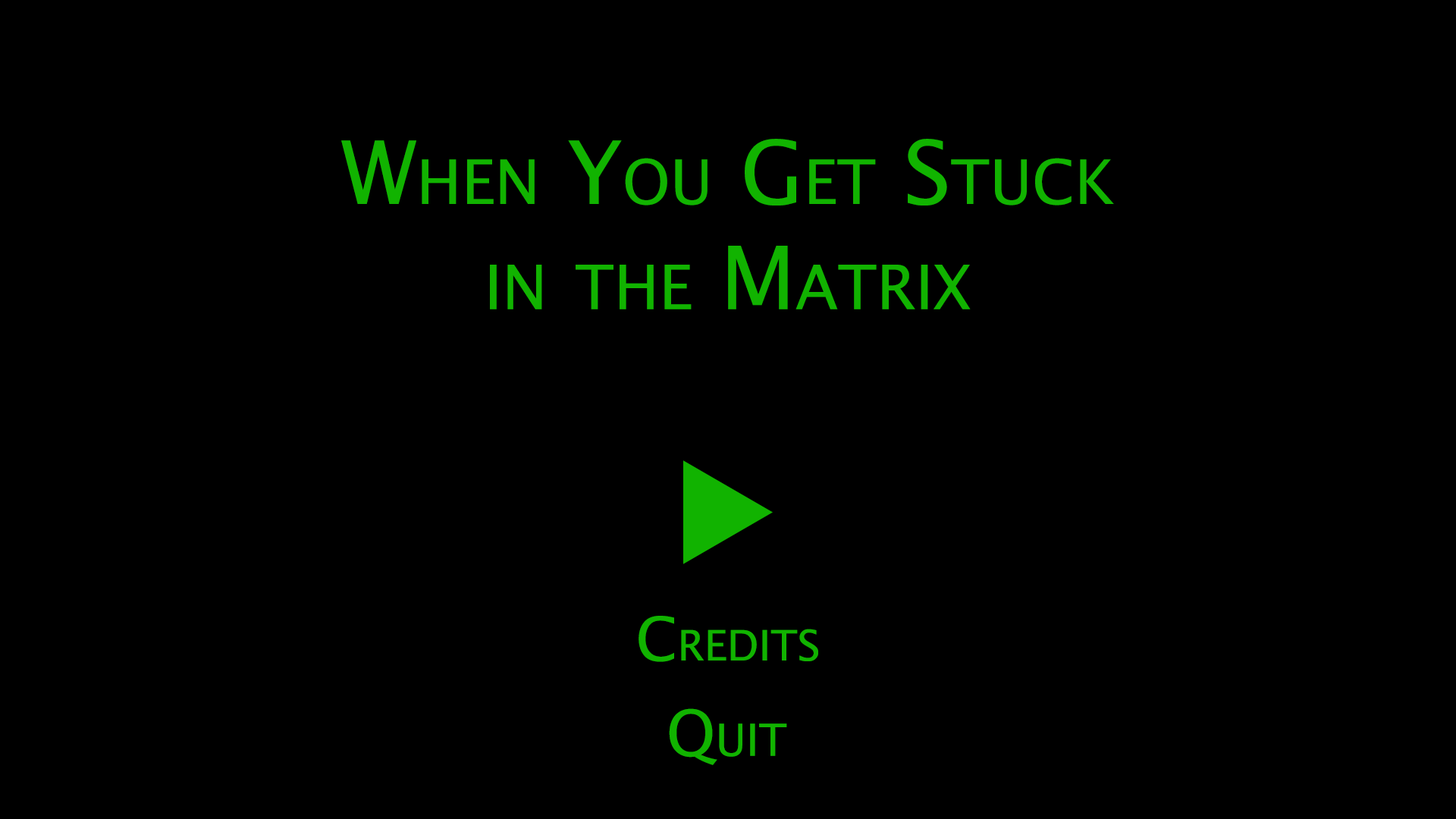
<style>
.page{position:relative;width:1456px;height:819px;background:#000000}
.page>*{position:absolute;margin:0}
.t1{font:87.7px "LucidaSans";color:#11b300;font-variant:small-caps}
.t2{font:60.3px "LucidaSans";color:#11b300;font-variant:small-caps}
.t3{font:63.2px "LucidaSans";color:#11b300;font-variant:small-caps}
</style>
<div class="page">
<p class="t1" style="left:341px;top:139px;width:773px;height:170px;text-align:center">When You Get Stuck<br>in the Matrix</p>
<p class="t2" style="left:639px;top:616px;width:179px;height:46px">Credits</p>
<p class="t3" style="left:669px;top:708px;width:118px;height:57px">Quit</p>
</div>
